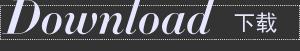
<style>
.page{position:relative;width:300px;height:51px;background:#333333}
.page>*{position:absolute;margin:0}
.t1{font:48px "Didot-HTF-B24-Bold-Ital";color:#e6e6ff}
.t2{font:22px "SimHei";color:#e6e6ff}
</style>
<div class="page">
<p class="t1" style="left:2px;top:0px;width:213px;height:35px">Download</p>
<p class="t2" style="left:234px;top:12px;width:43px;height:21px">下载</p>
</div>
